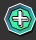
<style>
.page{position:relative;width:36px;height:40px;background:#333333}
.page>*{position:absolute;margin:0}
.t1{font:34.6px "Algerian";color:#ffffff}
</style>
<div class="page">
<p class="t1" style="left:12px;top:11px;width:17px;height:16px">+</p>
</div>
